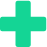
<style>
.page{position:relative;width:47px;height:47px;background:#14d595}
.page>*{position:absolute;margin:0}
.t1{font:77.8px "Bungee-Regular";color:#14d595}
</style>
<div class="page">
<p class="t1" style="left:0px;top:0px;width:47px;height:47px">+</p>
</div>
